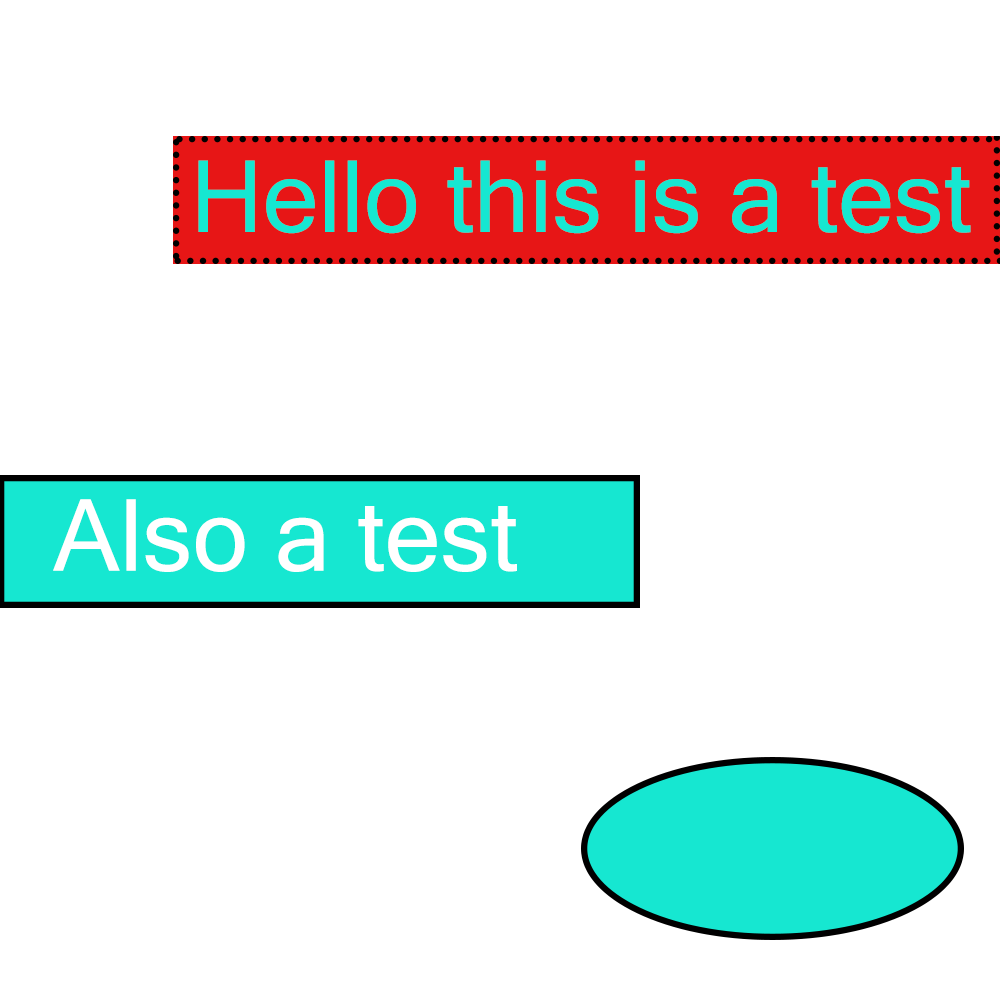
<style>
.page{position:relative;width:1000px;height:1000px;background:#ffffff}
.page>*{position:absolute;margin:0}
.t1{font:100px "MicrosoftSansSerif";color:#16e7d1}
.t2{font:100px "MicrosoftSansSerif";color:#ffffff}
</style>
<div class="page">
<p class="t1" style="left:198px;top:160px;width:773px;height:74px">Hello this is a test</p>
<p class="t2" style="left:53px;top:499px;width:464px;height:73px">Also a test</p>
</div>
